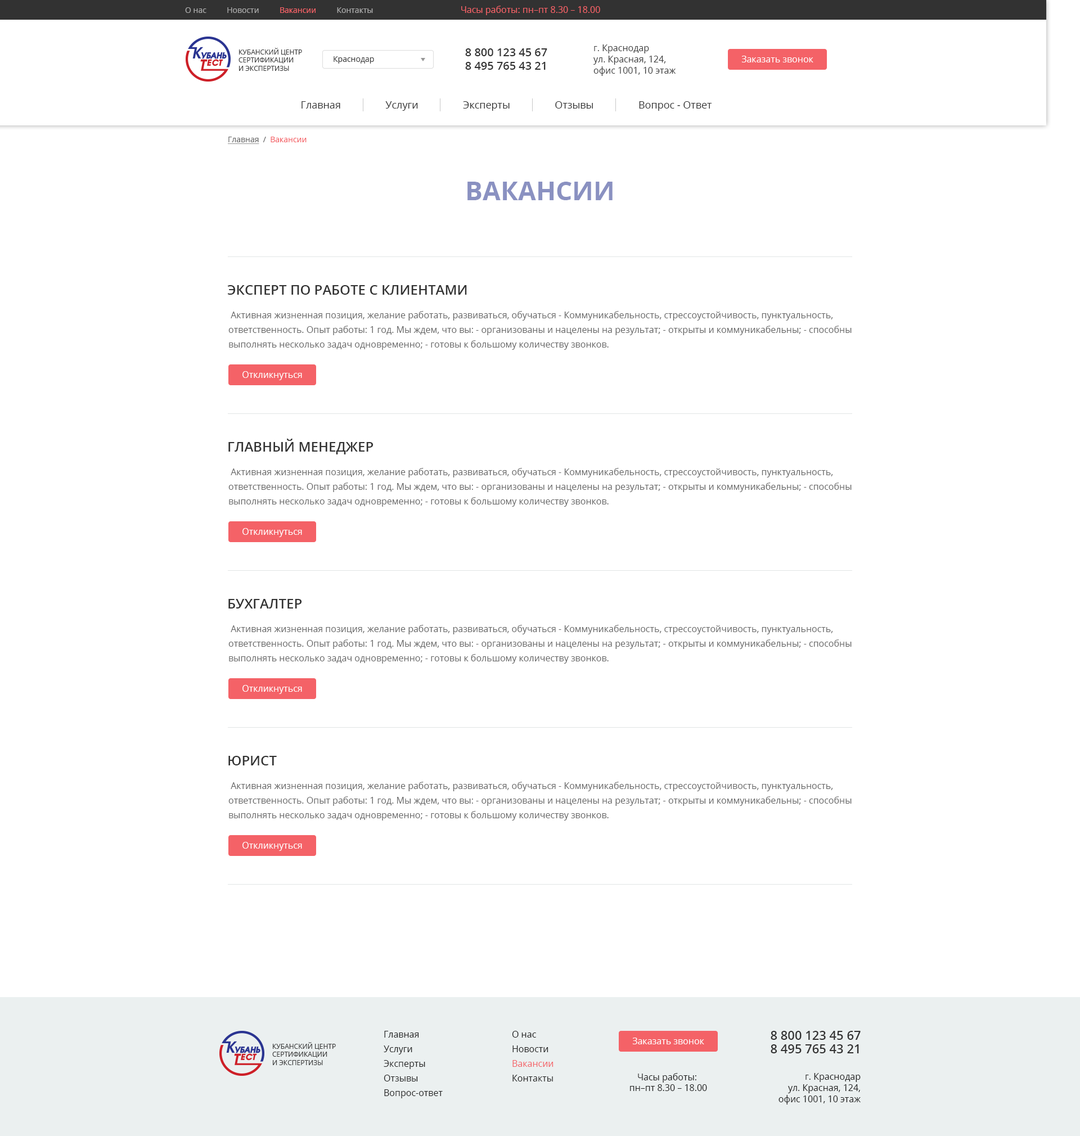
<style>
.page{position:relative;width:1080px;height:1136px;background:#ffffff}
.page>*{position:absolute;margin:0}
.t1{font:9px "OpenSans";color:#f46267}
.t2{font:7.9px "OpenSans";color:#aaaaaa}
.t3{font:7.9px "OpenSans";color:#f46267}
.t4{font:6.8px "OpenSans";color:#3c3c3c;text-transform:uppercase}
.t5{font:11.2px "OpenSans-Semibold";color:#323232}
.t6{font:9px/11.2px "OpenSans";color:#3c3c3c}
.t7{font:7.9px "OpenSans";color:#3c3c3c}
.t8{font:9px "OpenSans";color:#ffffff}
.t9{font:10.1px "OpenSans";color:#323232}
.t10{font:7.9px "OpenSans";color:#646464;text-decoration:underline}
.t11{font:7.9px "OpenSans";color:#646464}
.t12{font:25.9px "OpenSans-Bold";color:#8a91c1;text-transform:uppercase}
.t13{font:13.5px "OpenSans-Semibold";color:#323232;text-transform:uppercase}
.t14{font:9px/14.6px "OpenSans";color:#646464}
.t15{font:9px/14.6px "OpenSans";color:#1e1e1e}
.t16{font:9px/14.6px "OpenSans";color:#f46267}
.t17{font:12.4px "OpenSans-Semibold";color:#323232}
.t18{font:9px "OpenSans";color:#1e1e1e}
.t19{font:9px/11.2px "OpenSans";color:#1e1e1e}
</style>
<div class="page">
<p class="t1" style="left:461px;top:6px;width:139px;height:9px">Часы работы: пн–пт 8.30 – 18.00</p>
<p class="t2" style="left:185px;top:7px;width:188px;height:6px">О нас          Новости          <span class="t3">Вакансии</span>          Контакты</p>
<p class="t4" style="left:238px;top:48px;width:64px;height:23px">Кубанский центр<br>сертификации<br>и экспертизы</p>
<p class="t5" style="left:465px;top:48px;width:82px;height:8px">8 800 123 45 67</p>
<p class="t6" style="left:593px;top:44px;width:83px;height:32px">г. Краснодар<br>ул. Красная, 124, <br>офис 1001, 10 этаж</p>
<p class="t7" style="left:334px;top:56px;width:40px;height:8px">Краснодар</p>
<p class="t5" style="left:465px;top:62px;width:81px;height:8px">8 495 765 43 21</p>
<p class="t8" style="left:741px;top:56px;width:72px;height:6px">Заказать звонок</p>
<p class="t9" style="left:302px;top:101px;width:410px;height:10px">Главная                 Услуги                 Эксперты                 Отзывы                 Вопрос - Ответ</p>
<p class="t3" style="left:228px;top:137px;width:79px;height:7px"><span class="t10">Главная</span><span class="t11">  /  </span>Вакансии</p>
<p class="t12" style="left:467px;top:182px;width:146px;height:18px">Вакансии</p>
<p class="t13" style="left:227px;top:285px;width:240px;height:10px">Эксперт по работе с клиентами</p>
<p class="t14" style="left:228px;top:311px;width:624px;height:39px">Активная жизненная позиция, желание работать, развиваться, обучаться - Коммуникабельность, стрессоустойчивость, пунктуальность, <br>ответственность. Опыт работы: 1 год. Мы ждем, что вы: - организованы и нацелены на результат; - открыты и коммуникабельны; - способны <br>выполнять несколько задач одновременно; - готовы к большому количеству звонков.</p>
<p class="t8" style="left:242px;top:371px;width:60px;height:9px">Откликнуться</p>
<p class="t13" style="left:228px;top:439px;width:146px;height:15px">Главный менеджер</p>
<p class="t14" style="left:228px;top:468px;width:624px;height:39px">Активная жизненная позиция, желание работать, развиваться, обучаться - Коммуникабельность, стрессоустойчивость, пунктуальность, <br>ответственность. Опыт работы: 1 год. Мы ждем, что вы: - организованы и нацелены на результат; - открыты и коммуникабельны; - способны <br>выполнять несколько задач одновременно; - готовы к большому количеству звонков.</p>
<p class="t8" style="left:242px;top:528px;width:60px;height:9px">Откликнуться</p>
<p class="t13" style="left:228px;top:599px;width:74px;height:10px">Бухгалтер</p>
<p class="t14" style="left:228px;top:625px;width:624px;height:39px">Активная жизненная позиция, желание работать, развиваться, обучаться - Коммуникабельность, стрессоустойчивость, пунктуальность, <br>ответственность. Опыт работы: 1 год. Мы ждем, что вы: - организованы и нацелены на результат; - открыты и коммуникабельны; - способны <br>выполнять несколько задач одновременно; - готовы к большому количеству звонков.</p>
<p class="t8" style="left:242px;top:685px;width:60px;height:9px">Откликнуться</p>
<p class="t13" style="left:228px;top:756px;width:49px;height:10px">Юрист</p>
<p class="t14" style="left:228px;top:782px;width:624px;height:39px">Активная жизненная позиция, желание работать, развиваться, обучаться - Коммуникабельность, стрессоустойчивость, пунктуальность, <br>ответственность. Опыт работы: 1 год. Мы ждем, что вы: - организованы и нацелены на результат; - открыты и коммуникабельны; - способны <br>выполнять несколько задач одновременно; - готовы к большому количеству звонков.</p>
<p class="t8" style="left:242px;top:842px;width:60px;height:9px">Откликнуться</p>
<p class="t15" style="left:384px;top:1031px;width:59px;height:68px">Главная<br>Услуги<br>Эксперты<br>Отзывы<br>Вопрос-ответ</p>
<p class="t15" style="left:512px;top:1031px;width:42px;height:51px">О нас<br>Новости<br><span class="t16">Вакансии<br></span>Контакты</p>
<p class="t8" style="left:632px;top:1038px;width:72px;height:7px">Заказать звонок</p>
<p class="t17" style="left:771px;top:1031px;width:90px;height:9px">8 800 123 45 67</p>
<p class="t4" style="left:272px;top:1042px;width:64px;height:23px">Кубанский центр<br>сертификации<br>и экспертизы</p>
<p class="t17" style="left:771px;top:1045px;width:88px;height:9px">8 495 765 43 21</p>
<p class="t18" style="left:630px;top:1073px;width:77px;height:18px;text-align:center">Часы работы: <br>пн–пт 8.30 – 18.00</p>
<p class="t19" style="left:778px;top:1073px;width:83px;height:32px;text-align:right">г. Краснодар<br>ул. Красная, 124,<br>офис 1001, 10 этаж</p>
</div>
